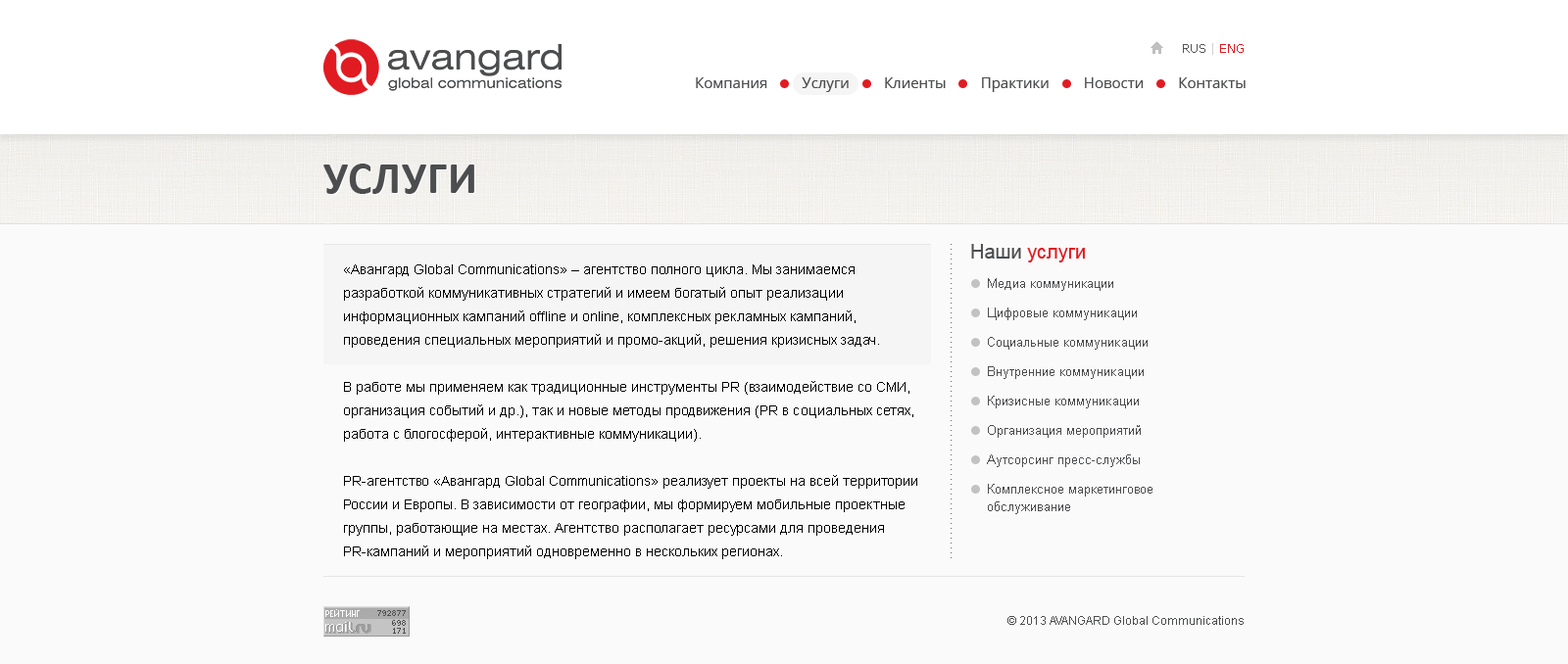
<style>
.page{position:relative;width:1568px;height:664px;background:#fafafa}
.page>*{position:absolute;margin:0}
.t1{font:11.8px "Verdana";color:#555555}
.t2{font:11.8px "Verdana";color:#d1d1d1}
.t3{font:11.8px "Verdana";color:#e11b22}
.t4{font:14.7px "OpenSans";color:#4c4d4f}
.t5{font:45.1px "Calibri-Bold";letter-spacing:0.02em;color:#4c4d4f;text-transform:uppercase}
.t6{font:19.6px "ArialMT";color:#e11b22}
.t7{font:19.6px "ArialMT";color:#4c4d4f}
.t8{font:13.7px/23.5px "ArialMT";color:#000000}
.t9{font:12.7px/29.4px "ArialMT";color:#4c4d4f}
.t10{font:12.7px/17.6px "ArialMT";color:#4c4d4f}
.t11{font:11.8px "ArialMT";color:#4c4d4f}
</style>
<div class="page">
<p class="t1" style="left:1183px;top:43px;width:61px;height:12px">RUS<span class="t2"> | </span><span class="t3">ENG</span></p>
<p class="t4" style="left:696px;top:77px;width:550px;height:15px">Компания         Услуги         Клиенты         Практики         Новости         Контакты</p>
<p class="t5" style="left:323px;top:164px;width:151px;height:30px">услуги</p>
<p class="t6" style="left:971px;top:244px;width:114px;height:19px"><span class="t7">Наши </span>услуги</p>
<p class="t8" style="left:344px;top:265px;width:573px;height:295px">«Авангард Global Communications» – агентство полного цикла. Мы занимаемся разработкой коммуникативных стратегий и имеем богатый опыт реализации информационных кампаний offline и online, комплексных рекламных кампаний, проведения специальных мероприятий и промо-акций, решения кризисных задач. <br> <br>В работе мы применяем как традиционные инструменты PR (взаимодействие со СМИ, организация событий и др.), так и новые методы продвижения (PR в социальных сетях, работа с блогосферой, интерактивные коммуникации).<br> <br>PR-агентство «Авангард Global Communications» реализует проекты на всей территории России и Европы. В зависимости от географии, мы формируем мобильные проектные группы, работающие на местах. Агентство располагает ресурсами для проведения PR-кампаний и мероприятий одновременно в нескольких регионах.</p>
<p class="t9" style="left:987px;top:278px;width:165px;height:236px">Медиа коммуникации<br>Цифровые коммуникации<br>Социальные коммуникации<br>Внутренние коммуникации<br>Кризисные коммуникации<br>Организация мероприятий<br>Аутсорсинг пресс-службы<br>Комплексное маркетинговое <br><span class="t10">обслуживание</span></p>
<p class="t11" style="left:1007px;top:616px;width:237px;height:9px">© 2013 AVANGARD Global Communications</p>
</div>
